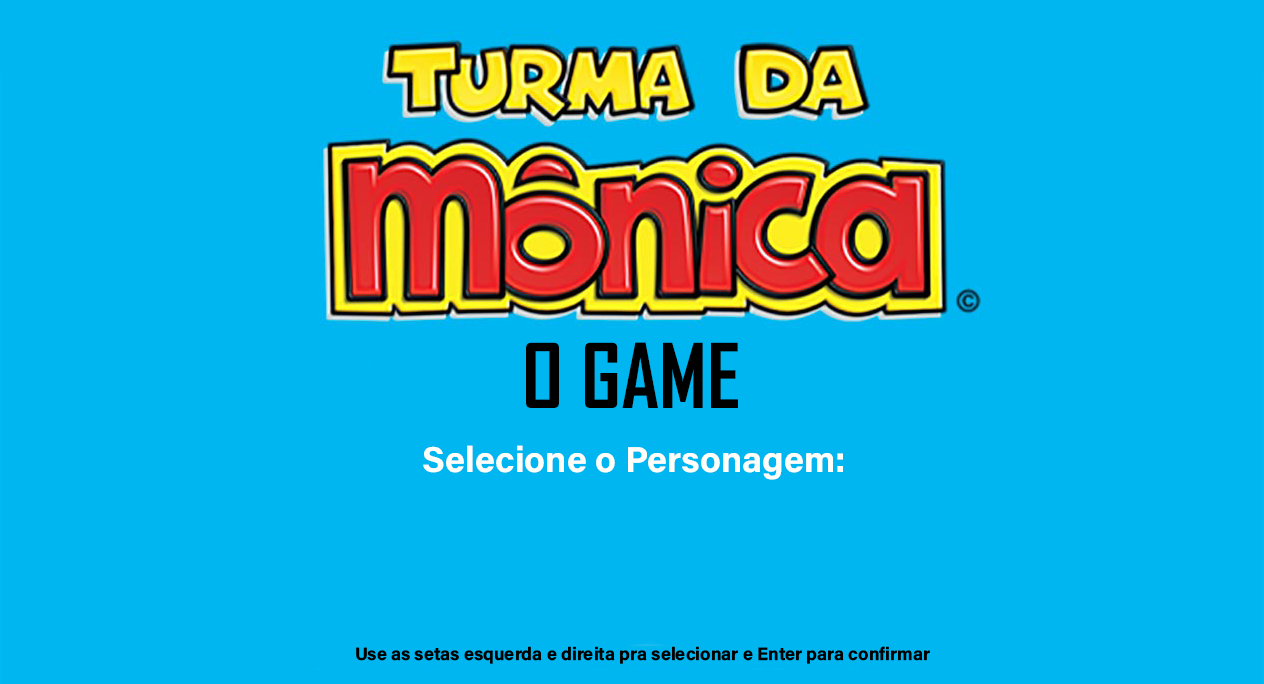
<style>
.page{position:relative;width:1264px;height:684px;background:#00b6f0}
.page>*{position:absolute;margin:0}
.t1{font:85.4px "AgencyFB-Bold";color:#000000}
.t2{font:36px "AcuminConcept-Bold";color:#fefff9}
.t3{font:18px "AcuminConcept-Bold";color:#000000}
</style>
<div class="page">
<p class="t1" style="left:526px;top:342px;width:212px;height:66px">O GAME</p>
<p class="t2" style="left:423px;top:445px;width:420px;height:35px">Selecione o Personagem:</p>
<p class="t3" style="left:356px;top:646px;width:574px;height:18px">Use as setas esquerda e direita pra selecionar e Enter para confirmar</p>
</div>
